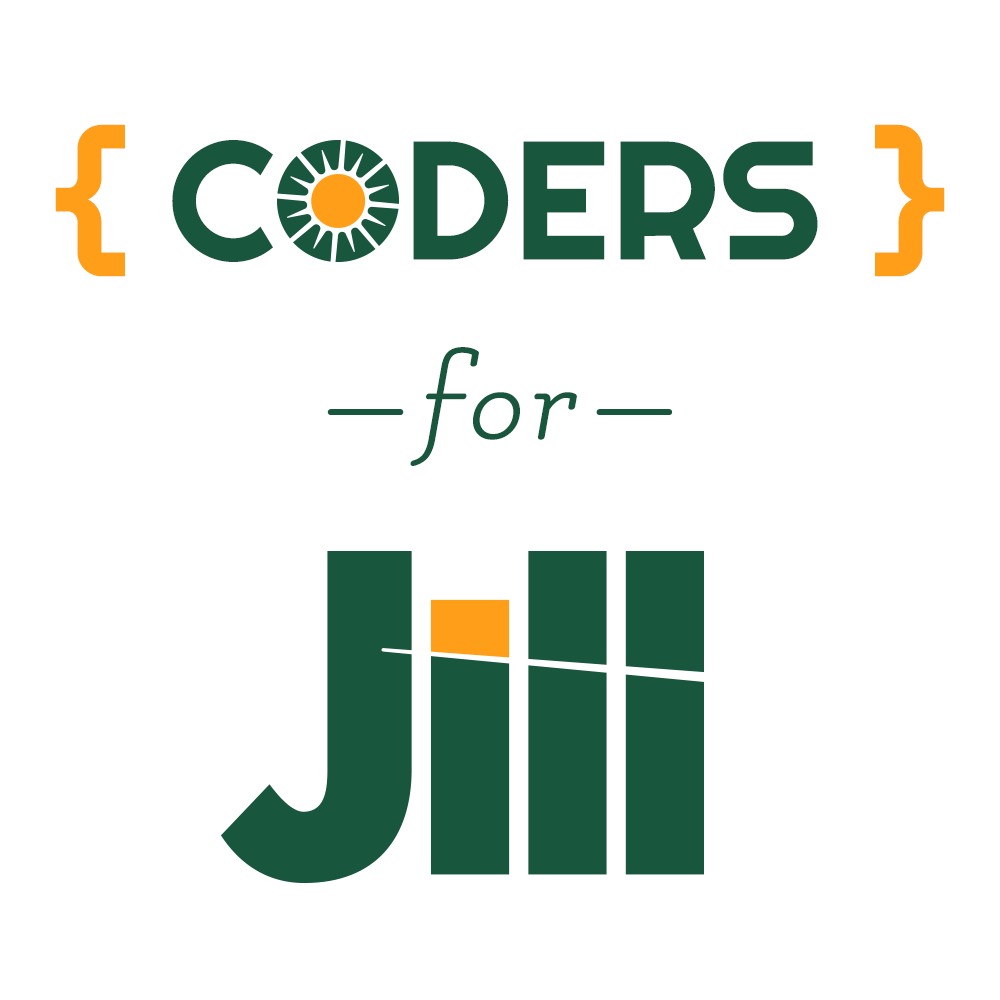
<style>
.page{position:relative;width:1000px;height:1000px;background:#ffffff}
.page>*{position:absolute;margin:0}
.t1{font:168px "Righteous-Regular";color:#18563e}
.t2{font:168px "Righteous-Regular";color:#ff9e19}
.t3{font:168px "Righteous-Regular";color:#ffffff}
.t4{font:120px "Flamenco-Regular";letter-spacing:0.05em;color:#18563e;font-style:italic}
.t5{font:120px "Flamenco-Regular";letter-spacing:0.05em;color:#18563e}
.t6{font:120px "Flamenco-Regular";letter-spacing:0.15em;color:#18563e;font-style:italic}
.t7{font:120px "Flamenco-Regular";color:#18563e}
</style>
<div class="page">
<p class="t1" style="left:55px;top:124px;width:890px;height:153px"><span class="t2">{ </span>C<span class="t3">O</span>DERS<span class="t2"> }</span></p>
<p class="t4" style="left:327px;top:347px;width:345px;height:119px"><span class="t5">—</span>fo<span class="t6">r</span><span class="t7">—</span></p>
</div>
